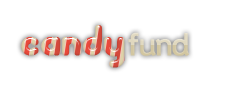
<style>
.page{position:relative;width:225px;height:85px;background:#ffffff}
.page>*{position:absolute;margin:0}
.t1{font:36px "pooplatter";text-transform:uppercase;font-weight:bold}
.t2{font:30px "WascoSans";letter-spacing:-0.04em;font-weight:bold}
.t3{font:30px "WascoSans";letter-spacing:-0.1em;font-weight:bold}
.t4{font:30px "WascoSans";letter-spacing:-0.08em;font-weight:bold}
</style>
<div class="page">
<p class="t1" style="left:21px;top:25px;width:104px;height:43px">candy</p>
<p class="t2" style="left:128px;top:32px;width:61px;height:24px">f<span class="t3">u</span><span class="t4">n</span>d</p>
</div>
